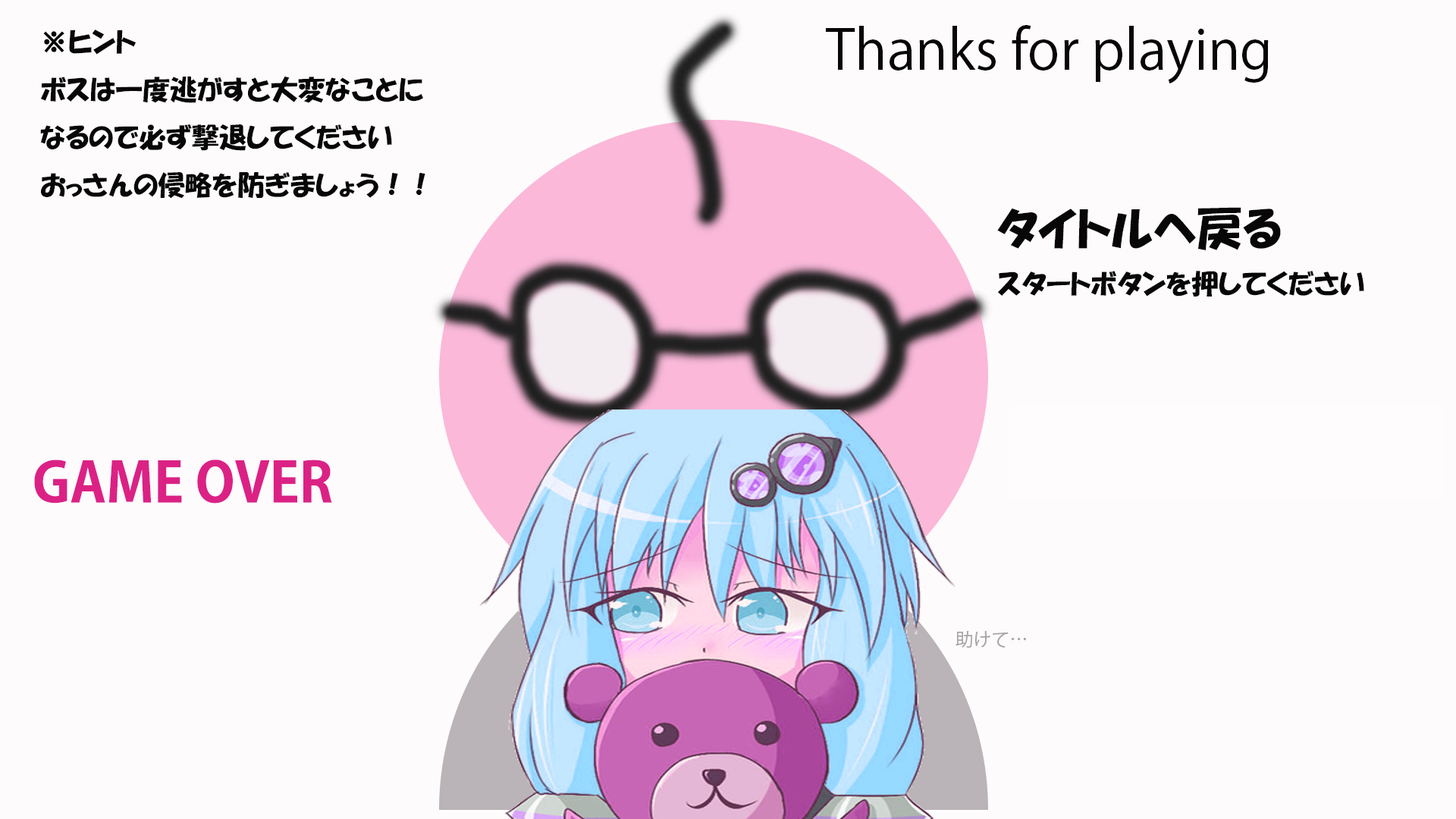
<style>
.page{position:relative;width:1456px;height:819px;background:#fefbfc}
.page>*{position:absolute;margin:0}
.t1{font:27.3px "HGPSoeiKakupoptai";color:#070707}
.t2{font:45.5px "HGPSoeiKakupoptai";color:#070707}
</style>
<div class="page">
<p class="t1" style="left:40px;top:30px;width:385px;height:169px">※ヒント<br>ボスは一度逃がすと大変なことに<br>なるので必ず撃退してください<br>おっさんの侵略を防ぎましょう！！</p>
<p class="t2" style="left:997px;top:207px;width:284px;height:43px">タイトルへ戻る</p>
<p class="t1" style="left:998px;top:271px;width:366px;height:26px">スタートボタンを押してください</p>
</div>
